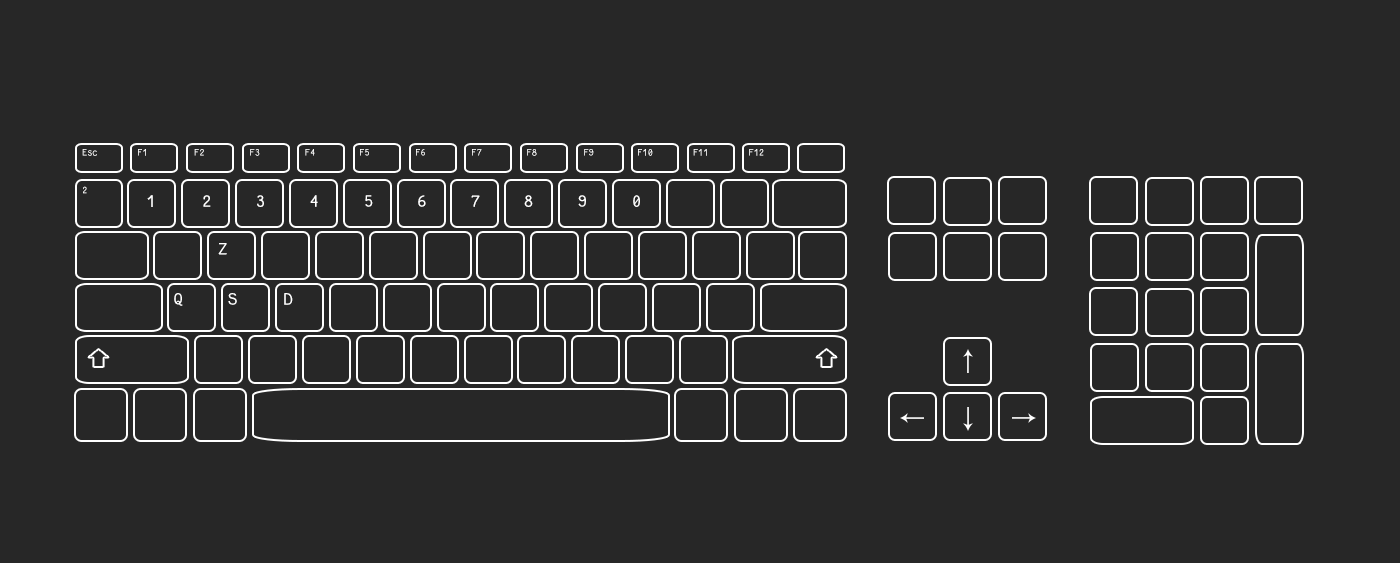
<style>
.page{position:relative;width:1400px;height:563px;background:#272727}
.page>*{position:absolute;margin:0}
.t1{font:10px "FantasqueSansMono-Regular"}
.t2{font:10px "FantasqueSansMono-Regular";color:#ffffff}
.t3{font:18px "FantasqueSansMono-Regular";color:#ffffff}
</style>
<div class="page">
<p class="t1" style="left:82px;top:149px;width:15px;height:7px">Esc</p>
<p class="t2" style="left:138px;top:149px;width:8px;height:7px">F1</p>
<p class="t1" style="left:194px;top:149px;width:10px;height:7px">F2</p>
<p class="t1" style="left:250px;top:149px;width:10px;height:7px">F3</p>
<p class="t2" style="left:305px;top:149px;width:10px;height:7px">F4</p>
<p class="t2" style="left:360px;top:149px;width:9px;height:7px">F5</p>
<p class="t2" style="left:416px;top:149px;width:9px;height:7px">F6</p>
<p class="t2" style="left:472px;top:149px;width:10px;height:7px">F7</p>
<p class="t1" style="left:527px;top:149px;width:10px;height:7px">F8</p>
<p class="t2" style="left:584px;top:149px;width:10px;height:7px">F9</p>
<p class="t2" style="left:638px;top:149px;width:15px;height:7px">F10</p>
<p class="t1" style="left:693px;top:149px;width:14px;height:7px">F11</p>
<p class="t1" style="left:749px;top:149px;width:15px;height:7px">F12</p>
<p class="t2" style="left:83px;top:186px;width:4px;height:8px">2</p>
<p class="t3" style="left:147px;top:195px;width:6px;height:12px">1</p>
<p class="t3" style="left:203px;top:195px;width:8px;height:12px">2</p>
<p class="t3" style="left:257px;top:195px;width:7px;height:12px">3</p>
<p class="t3" style="left:310px;top:195px;width:8px;height:12px">4</p>
<p class="t3" style="left:365px;top:195px;width:8px;height:12px">5</p>
<p class="t3" style="left:418px;top:195px;width:8px;height:12px">6</p>
<p class="t3" style="left:471px;top:195px;width:9px;height:12px">7</p>
<p class="t3" style="left:524px;top:195px;width:9px;height:12px">8</p>
<p class="t3" style="left:578px;top:195px;width:8px;height:12px">9</p>
<p class="t3" style="left:633px;top:195px;width:7px;height:12px">0</p>
<p class="t3" style="left:218px;top:243px;width:9px;height:12px">Z</p>
<p class="t3" style="left:174px;top:293px;width:9px;height:13px">Q</p>
<p class="t3" style="left:228px;top:293px;width:9px;height:12px">S</p>
<p class="t3" style="left:284px;top:293px;width:9px;height:12px">D</p>
</div>
